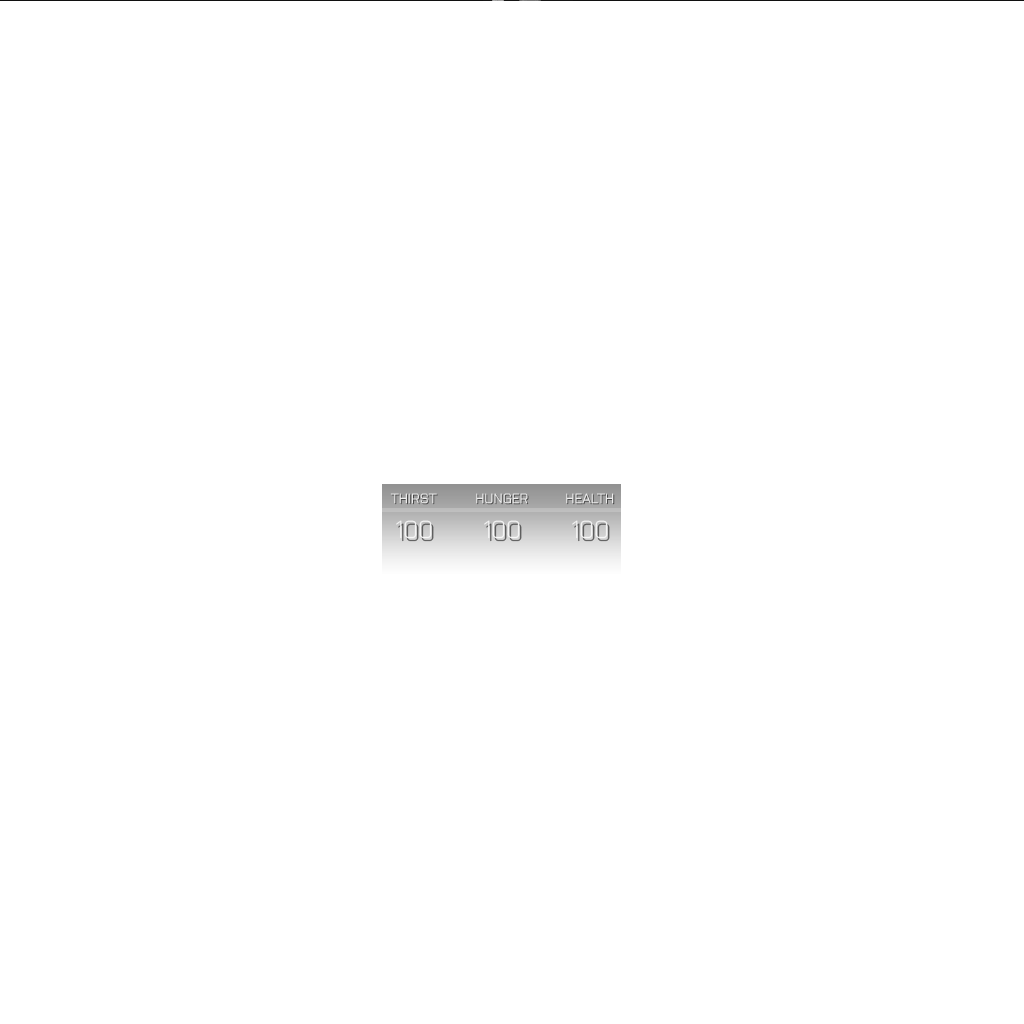
<style>
.page{position:relative;width:1024px;height:1024px;background:#ffffff}
.page>*{position:absolute;margin:0}
.t1{font:13.2px "Purista-Light";letter-spacing:0.04em}
.t2{font:24.6px "Purista-Light";color:#ffffff}
</style>
<div class="page">
<p class="t1" style="left:390px;top:492px;width:47px;height:11px">THIRST</p>
<p class="t1" style="left:476px;top:492px;width:52px;height:11px">HUNGER</p>
<p class="t1" style="left:566px;top:492px;width:48px;height:11px">HEALTH</p>
<p class="t2" style="left:396px;top:519px;width:36px;height:19px">100</p>
<p class="t2" style="left:484px;top:519px;width:36px;height:19px">100</p>
<p class="t2" style="left:572px;top:519px;width:36px;height:19px">100</p>
</div>
